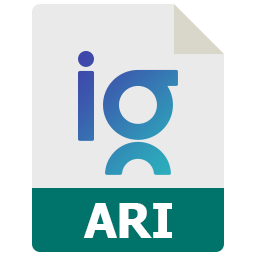
<style>
.page{position:relative;width:256px;height:256px;background:#eaeaea}
.page>*{position:absolute;margin:0}
.t1{font:48px "Tahoma-Bold";color:#ffffff}
</style>
<div class="page">
<p class="t1" style="left:83px;top:203px;width:89px;height:35px">ARI</p>
</div>
